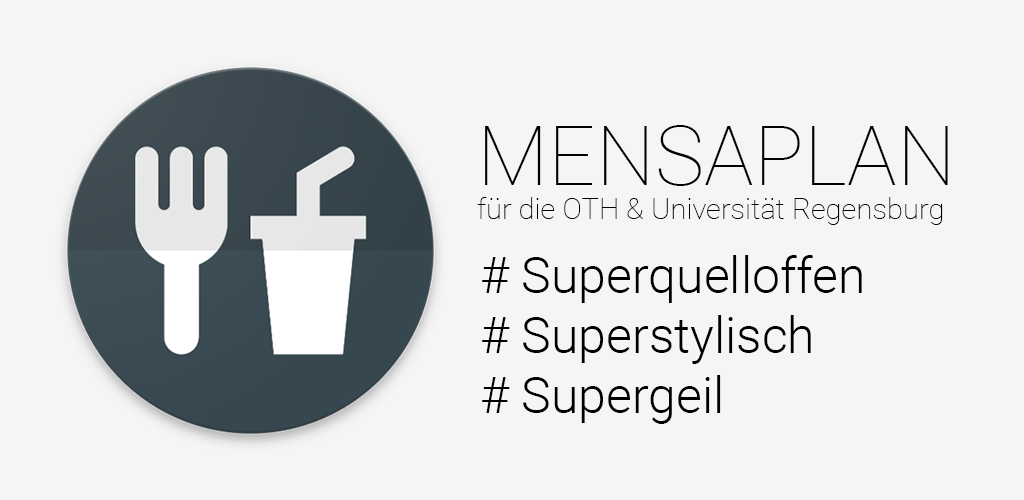
<style>
.page{position:relative;width:1024px;height:500px;background:#f5f5f5}
.page>*{position:absolute;margin:0}
.t1{font:29.2px "Roboto-Thin";color:#000000}
.t2{font:83.3px "Roboto-Thin";color:#000000}
.t3{font:50px "Roboto-Light";color:#000000}
</style>
<div class="page">
<p class="t1" style="left:477px;top:125px;width:471px;height:100px"><span class="t2">MENSAPLAN<br></span>für die OTH &amp; Universität Regensburg</p>
<p class="t3" style="left:482px;top:255px;width:380px;height:169px"># Superquelloffen<br># Superstylisch<br># Supergeil</p>
</div>
